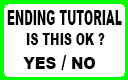
<style>
.page{position:relative;width:128px;height:80px;background:#ffffff}
.page>*{position:absolute;margin:0}
.t1{font:19.7px "Arial-Black";color:#050505;scale:0.56 1}
.t2{font:16.1px "Arial-Black";color:#050505;scale:0.69 1}
.t3{font:16.7px "Arial-Black";color:#050505;scale:0.89 1}
.t4{font:20px "Arial-Black";color:#050505;scale:0.89 1}
</style>
<div class="page">
<p class="t1" style="left:7px;top:10px;width:115px;height:15px">ENDING TUTORIAL</p>
<p class="t2" style="left:26px;top:33px;width:79px;height:12px">IS THIS OK ?</p>
<p class="t3" style="left:23px;top:55px;width:72px;height:15px">YES <span class="t4">/</span> NO</p>
</div>
